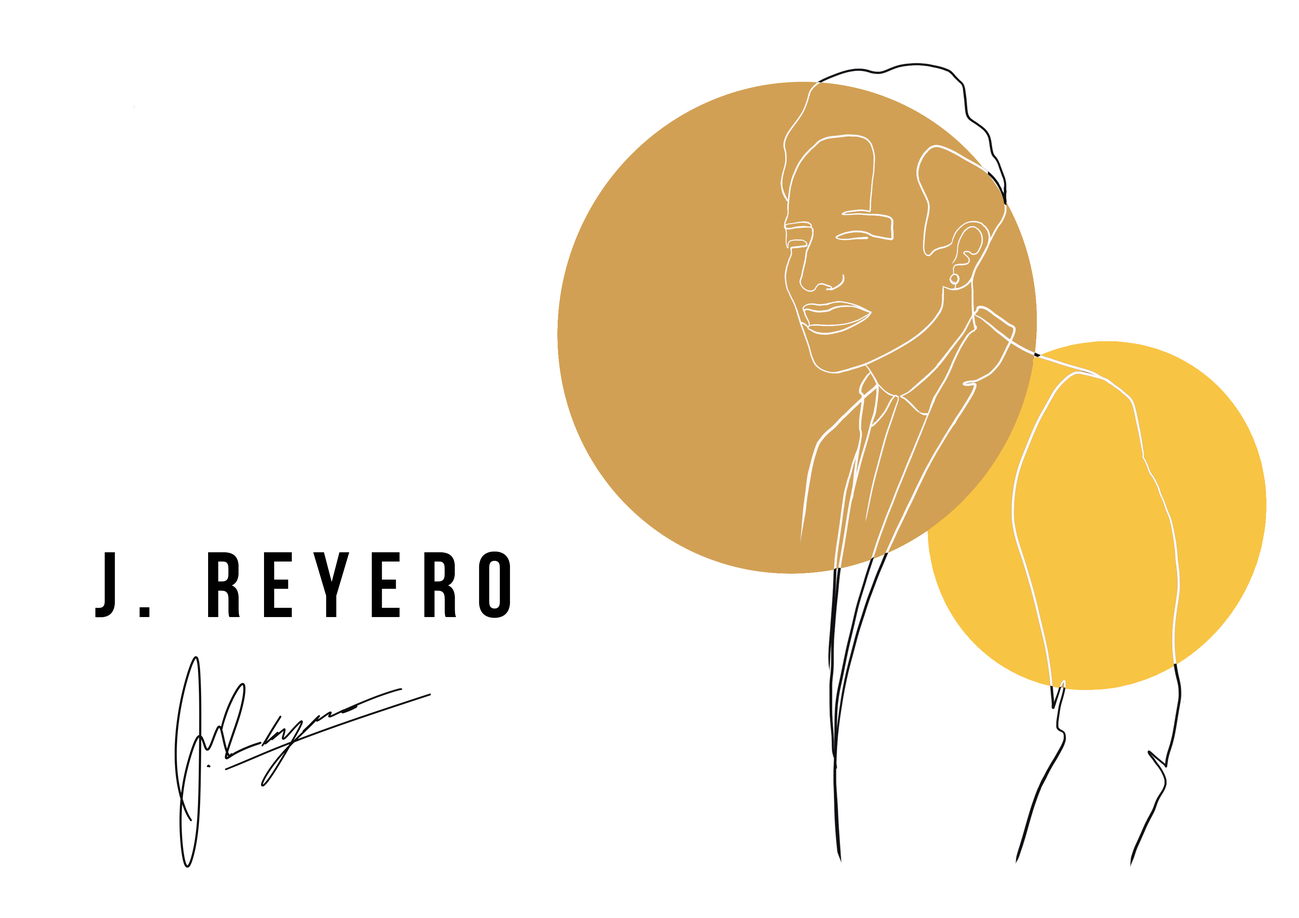
<style>
.page{position:relative;width:1299px;height:918px;background:#ffffff}
.page>*{position:absolute;margin:0}
.t1{font:92.6px "BebasNeue";letter-spacing:0.2em;color:#000000}
</style>
<div class="page">
<p class="t1" style="left:95px;top:552px;width:415px;height:66px">J. Reyero</p>
</div>
